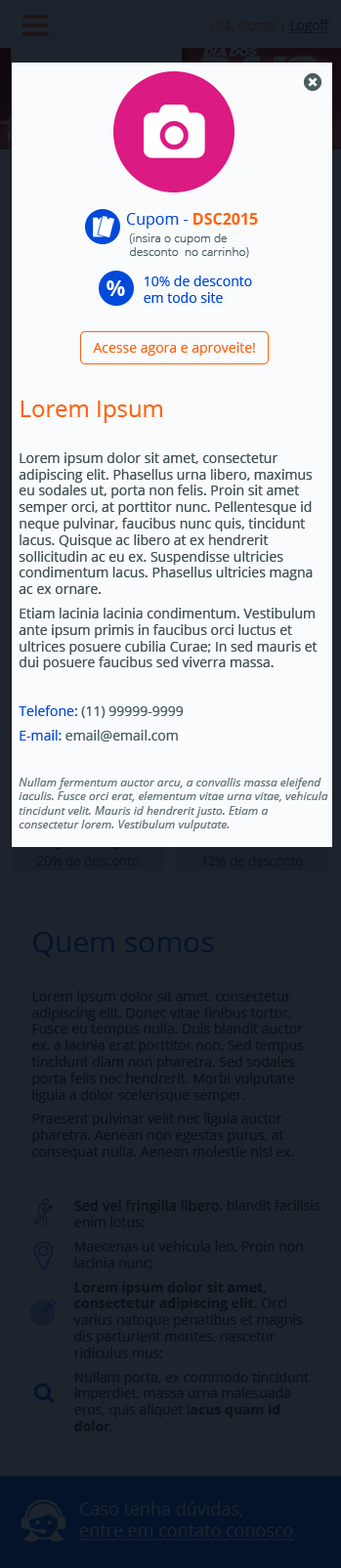
<style>
.page{position:relative;width:341px;height:1568px;background:#fafbfc}
.page>*{position:absolute;margin:0}
.t1{font:13.7px "OpenSans-Light";color:#0b1118}
.t2{font:13.7px "OpenSans-Light";color:#0b1118;text-decoration:underline}
.t3{font:15.6px "OpenSans";color:#0049d9}
.t4{font:15.6px "OpenSans-Bold";color:#ff620e}
.t5{font:11.7px "OpenSans-Light";color:#4c5e60}
.t6{font:21.2px "OpenSans-Bold";color:#ffffff}
.t7{font:13.7px "OpenSans";color:#0049d9}
.t8{font:13.7px "OpenSans";color:#ff620e}
.t9{font:13.7px "OpenSans";color:#405052}
.t10{font:23.4px "OpenSans";color:#ff620e}
.t11{font:13.7px "OpenSans";color:#4b5d5f}
.t12{font:11.7px "OpenSans-Italic";color:#657779}
.t13{font:13.7px "OpenSans";color:#0b1118}
.t14{font:29.3px "OpenSans";color:#0b1118}
.t15{font:13.7px "OpenSans";color:#0b1118;font-weight:bold}
.t16{font:13.7px "OpenSans-Bold";color:#0b1118}
.t17{font:17.6px/13.7px "OpenSans";color:#1d242d;text-decoration:underline}
.t18{font:17.6px/13.7px "OpenSans";color:#1d242d}
</style>
<div class="page">
<p class="t1" style="left:211px;top:20px;width:118px;height:13px">Olá, Nome | <span class="t2">Logoff</span></p>
<p class="t3" style="left:126px;top:213px;width:132px;height:16px">Cupom - <span class="t4">DSC2015</span></p>
<p class="t5" style="left:129px;top:233px;width:120px;height:25px">(insira o cupom de <br>desconto  no carrinho)</p>
<p class="t6" style="left:106px;top:280px;width:19px;height:16px">%</p>
<p class="t7" style="left:144px;top:275px;width:108px;height:28px">10% de desconto <br>em todo site</p>
<p class="t8" style="left:93px;top:342px;width:162px;height:14px">Acesse agora e aproveite!</p>
<p class="t9" style="left:19px;top:401px;width:309px;height:430px"><span class="t10">Lorem Ipsum<br><br></span>Lorem ipsum dolor sit amet, consectetur adipiscing elit. Phasellus urna libero, maximus eu sodales ut, porta non felis. Proin sit amet semper orci, at porttitor nunc. Pellentesque id neque pulvinar, faucibus nunc quis, tincidunt lacus. Quisque ac libero at ex hendrerit sollicitudin ac eu ex. Suspendisse ultricies condimentum lacus. Phasellus ultricies magna ac ex ornare.<br>Etiam lacinia lacinia condimentum. Vestibulum ante ipsum primis in faucibus orci luctus et ultrices posuere cubilia Curae; In sed mauris et dui posuere faucibus sed viverra massa. <br><span class="t7"><br>Telefone: </span><span class="t11">(11) 99999-9999<br></span><span class="t7">E-mail: </span><span class="t11">email@email.com<br><br></span><span class="t12">Nullam fermentum auctor arcu, a convallis massa eleifend iaculis. Fusce orci erat, elementum vitae urna vitae, vehicula tincidunt velit. Mauris id hendrerit justo. Etiam a consectetur lorem. Vestibulum vulputate.</span></p>
<p class="t13" style="left:31px;top:932px;width:273px;height:228px"><span class="t14">Quem somos<br><br></span>Lorem ipsum dolor sit amet, consectetur adipiscing elit. Donec vitae finibus tortor. Fusce eu tempus nulla. Duis blandit auctor ex, a lacinia erat porttitor non. Sed tempus tincidunt diam non pharetra. Sed sodales porta felis nec hendrerit. Morbi vulputate ligula a dolor scelerisque semper.<br>Praesent pulvinar velit nec ligula auctor pharetra. Aenean non egestas purus, at consequat nulla. Aenean molestie nisl ex.</p>
<p class="t13" style="left:73px;top:1200px;width:247px;height:231px"><span class="t15">Sed vel fringilla libero</span>, blandit facilisis enim lotus;<br>Maecenas ut vehicula leo. Proin non lacinia nunc;<br><span class="t16">Lorem ipsum dolor sit amet, consectetur adipiscing elit. </span>Orci varius natoque penatibus et magnis dis parturient montes, nascetur ridiculus mus;<br>Nullam porta, ex commodo tincidunt imperdiet, massa urna malesuada eros, quis aliquet l<span class="t16">acus quam id dolor</span>.</p>
<p class="t17" style="left:79px;top:1502px;width:218px;height:39px"><span class="t18">Caso tenha dúvidas,<br></span>entre em contato conosco<span class="t18">.</span></p>
</div>
